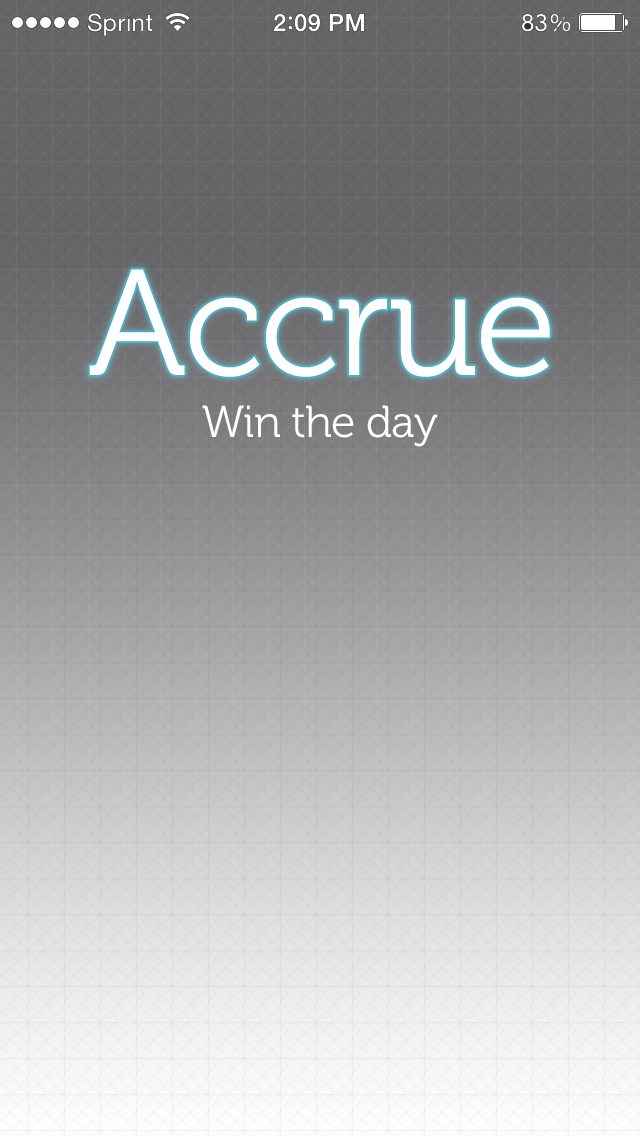
<style>
.page{position:relative;width:640px;height:1136px}
.page>*{position:absolute;margin:0}
.t1{font:150px "Museo300-Regular";letter-spacing:-0.02em;color:#ffffff}
.t2{font:44.7px "Museo300-Regular";letter-spacing:-0.02em;color:#ffffff}
</style>
<div class="page">
<p class="t1" style="left:89px;top:269px;width:461px;height:108px">Accrue</p>
<p class="t2" style="left:202px;top:405px;width:236px;height:42px">Win the day</p>
</div>
